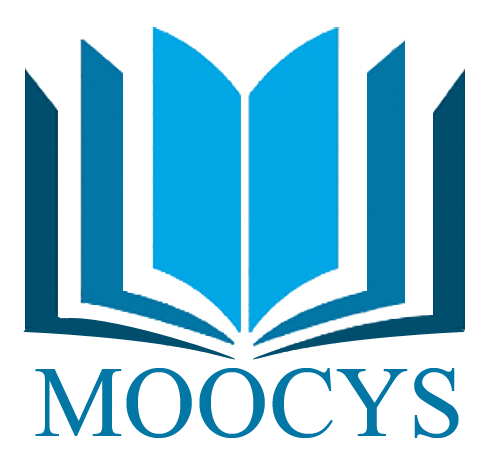
<style>
.page{position:relative;width:498px;height:450px;background:#ffffff}
.page>*{position:absolute;margin:0}
.t1{font:150px "Microsoft-Himalaya";color:#0276a5}
</style>
<div class="page">
<p class="t1" style="left:35px;top:368px;width:424px;height:70px">MOOCYS</p>
</div>
